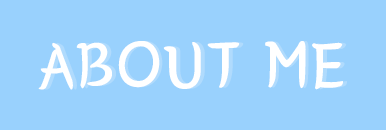
<style>
.page{position:relative;width:386px;height:130px;background:#99d1fd}
.page>*{position:absolute;margin:0}
.t1{font:70px "BMYEONSUNG";letter-spacing:0.025em;color:#ffffff}
.t2{font:70px "BMYEONSUNG";letter-spacing:0.025em}
</style>
<div class="page">
<p class="t1" style="left:38px;top:41px;width:305px;height:49px">ABOUT ME</p>
<p class="t2" style="left:42px;top:41px;width:305px;height:49px">ABOUT ME</p>
</div>
